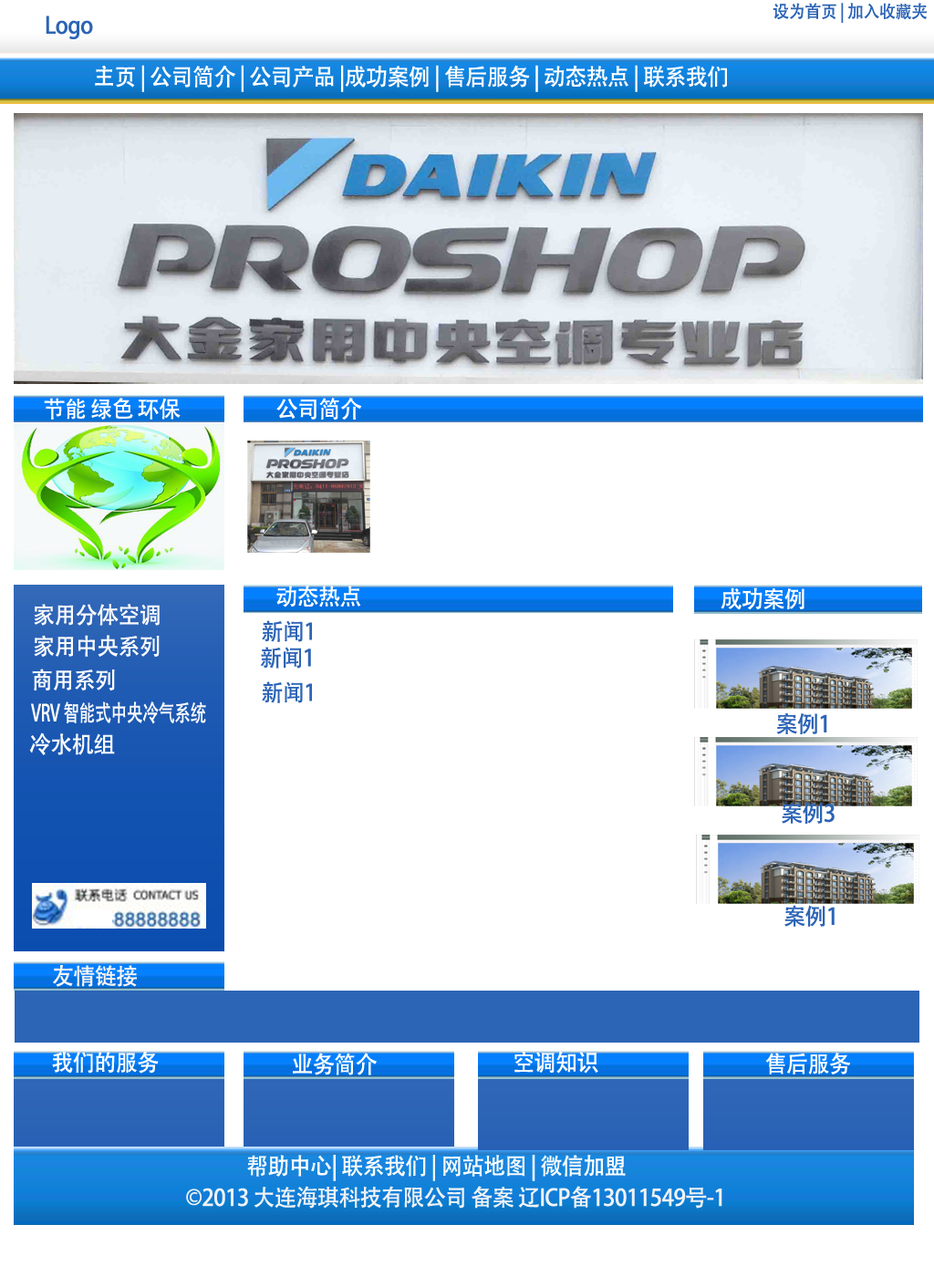
<style>
.page{position:relative;width:934px;height:1277px;background:#ffffff}
.page>*{position:absolute;margin:0}
.t1{font:17.2px "AdobeHeitiStd-Regular";letter-spacing:-0.025em;color:#2c64b6;scale:0.95 1}
.t2{font:23px "AdobeHeitiStd-Regular";letter-spacing:-0.025em;color:#2c64b6;scale:0.95 1}
.t3{font:23px "AdobeHeitiStd-Regular";letter-spacing:-0.025em;color:#ffffff;scale:0.95 1}
.t4{font:23px "AdobeHeitiStd-Regular";letter-spacing:-0.025em;color:#f9fafc;scale:0.95 1}
.t5{font:23px "AdobeHeitiStd-Regular";letter-spacing:-0.025em;color:#f9fafc;scale:0.71 1}
.t6{font:23px "AdobeHeitiStd-Regular";letter-spacing:-0.025em;color:#f9f4f4;scale:0.95 1}
.t7{font:23px "AdobeHeitiStd-Regular";letter-spacing:-0.025em;color:#fafcfe;scale:0.95 1}
.t8{font:23px "AdobeHeitiStd-Regular";letter-spacing:-0.025em;color:#f0f2f5;scale:0.95 1}
</style>
<div class="page">
<p class="t1" style="left:772px;top:3px;width:155px;height:20px">设为首页 | 加入收藏夹</p>
<p class="t2" style="left:46px;top:16px;width:47px;height:23px">Logo</p>
<p class="t3" style="left:95px;top:65px;width:632px;height:27px">主页 | 公司简介 | 公司产品 |成功案例 | 售后服务 | 动态热点 | 联系我们</p>
<p class="t3" style="left:44px;top:398px;width:137px;height:22px">节能 绿色 环保</p>
<p class="t3" style="left:276px;top:398px;width:86px;height:22px">公司简介</p>
<p class="t3" style="left:276px;top:586px;width:85px;height:21px">动态热点</p>
<p class="t3" style="left:720px;top:587px;width:84px;height:23px">成功案例</p>
<p class="t4" style="left:34px;top:604px;width:126px;height:22px">家用分体空调</p>
<p class="t2" style="left:262px;top:620px;width:50px;height:22px">新闻1</p>
<p class="t4" style="left:34px;top:635px;width:126px;height:22px">家用中央系列</p>
<p class="t2" style="left:260px;top:647px;width:51px;height:22px">新闻1</p>
<p class="t4" style="left:32px;top:669px;width:83px;height:21px">商用系列</p>
<p class="t2" style="left:262px;top:681px;width:50px;height:22px">新闻1</p>
<p class="t5" style="left:31px;top:701px;width:175px;height:23px">VRV 智能式中央冷气系统</p>
<p class="t2" style="left:776px;top:712px;width:51px;height:22px">案例1</p>
<p class="t4" style="left:29px;top:732px;width:86px;height:23px">冷水机组</p>
<p class="t2" style="left:782px;top:802px;width:52px;height:22px">案例3</p>
<p class="t2" style="left:784px;top:905px;width:50px;height:22px">案例1</p>
<p class="t6" style="left:53px;top:965px;width:84px;height:22px">友情链接</p>
<p class="t3" style="left:52px;top:1051px;width:107px;height:22px">我们的服务</p>
<p class="t3" style="left:293px;top:1052px;width:84px;height:23px">业务简介</p>
<p class="t3" style="left:514px;top:1051px;width:84px;height:22px">空调知识</p>
<p class="t3" style="left:765px;top:1052px;width:85px;height:22px">售后服务</p>
<p class="t7" style="left:247px;top:1155px;width:379px;height:26px">帮助中心| 联系我们 | 网站地图 | 微信加盟</p>
<p class="t8" style="left:186px;top:1186px;width:536px;height:22px">©2013 大连海琪科技有限公司 备案 辽ICP备13011549号-1</p>
</div>
